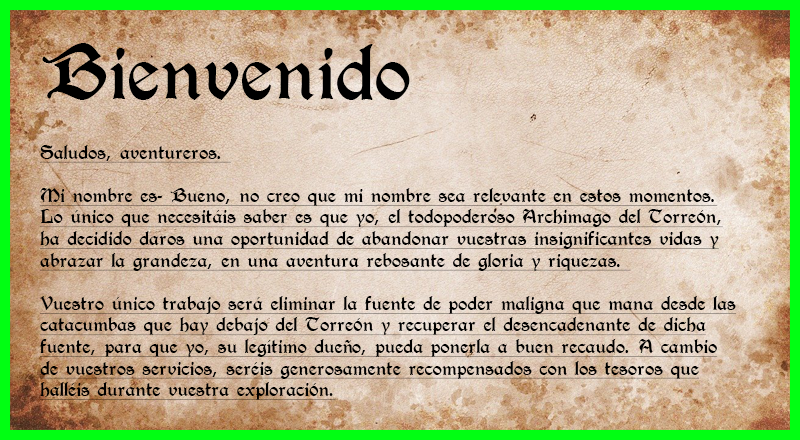
<style>
.page{position:relative;width:800px;height:440px}
.page>*{position:absolute;margin:0}
.t1{font:72px "T4C-Beaulieux";color:#000000}
.t2{font:18px "T4C-Beaulieux";color:#000000;text-decoration:underline}
</style>
<div class="page">
<p class="t1" style="left:42px;top:43px;width:368px;height:57px">Bienvenido</p>
<p class="t2" style="left:40px;top:145px;width:696px;height:255px">Saludos, aventureros. <br><br>Mi nombre es- Bueno, no creo que mi nombre sea relevante en estos momentos. Lo único que necesitáis saber es que yo, el todopoderoso Archimago del Torreón, ha decidido daros una oportunidad de abandonar vuestras insignificantes vidas y abrazar la grandeza, en una aventura rebosante de gloria y riquezas. <br><br>Vuestro único trabajo será eliminar la fuente de poder maligna que mana desde las catacumbas que hay debajo del Torreón y recuperar el desencadenante de dicha fuente, para que yo, su legítimo dueño, pueda ponerla a buen recaudo. A cambio de vuestros servicios, seréis generosamente recompensados con los tesoros que halléis durante vuestra exploración.<br><br>Siendo sinceros, tampoco es que pudieseis decir que no. Después de todo, el verdugo me comentó que planeaban deshacerse de vosotros dentro de pocos días por escasez de celdas. Al parecer ha habido un incremento de revueltas entre la plebe porque los nobles no nos preocupamos por su bienestar ¿Os lo podéis creer? Falacias, todas y cada una de ellas ¡Por supuesto que me preocupo! Después de todo, he pagado una gran cantidad de monedas por vuestra liberación. No me gustaría tener que contratar a más gente, así que por favor, procurad no morir dentro de la mazmorra. <br><br>Atentamente: el Archimago</p>
</div>
